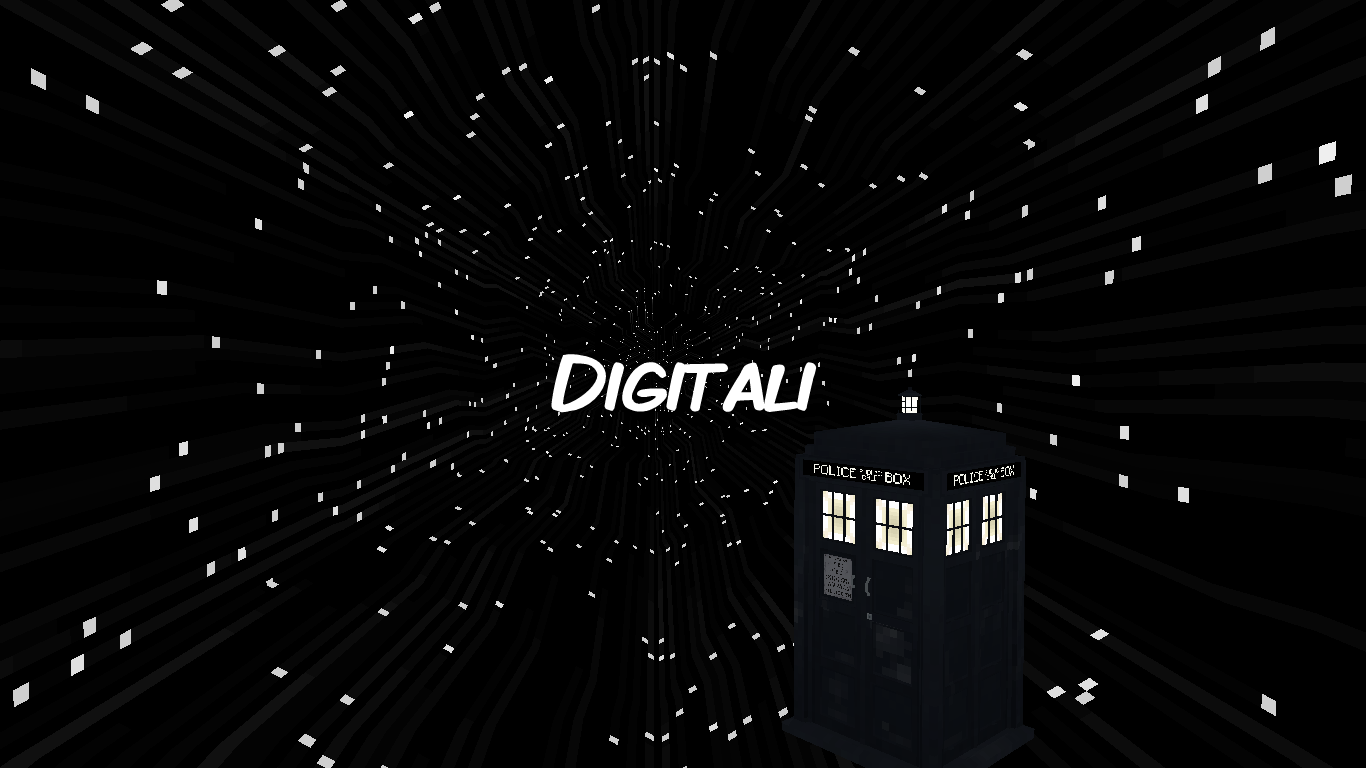
<style>
.page{position:relative;width:1366px;height:768px;background:#000000}
.page>*{position:absolute;margin:0}
.t1{font:82px "KomikaDisplayKaps";color:#ffffff}
</style>
<div class="page">
<p class="t1" style="left:551px;top:354px;width:266px;height:59px">Digitali</p>
</div>
